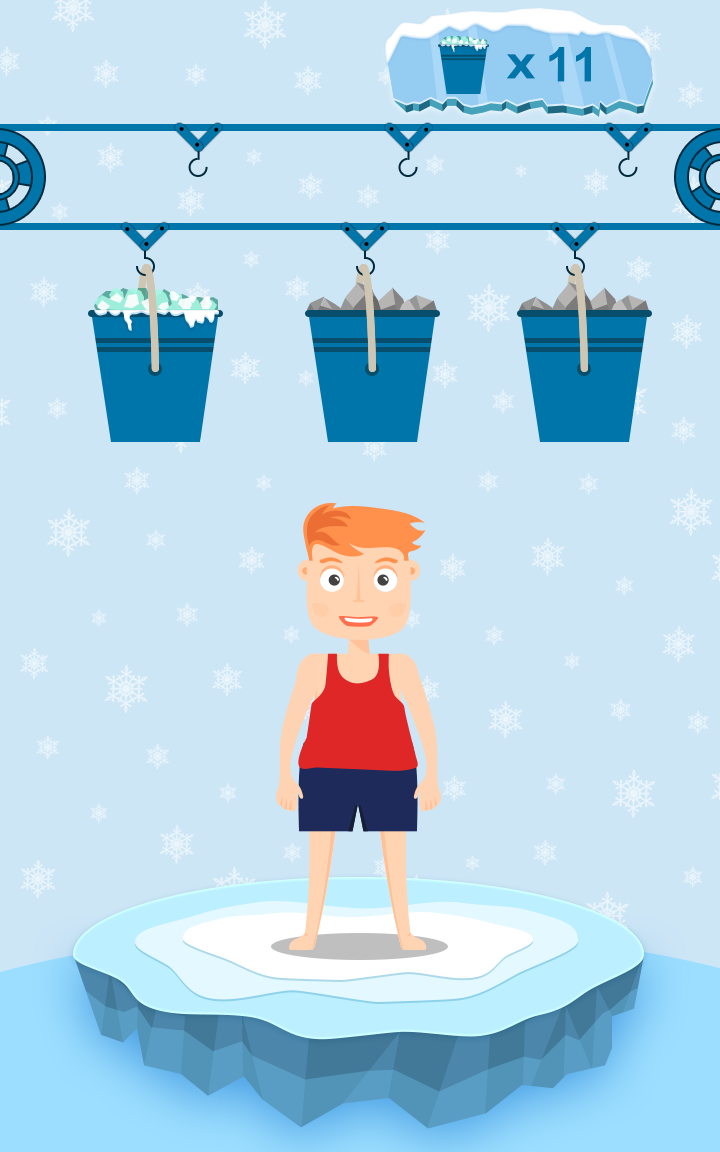
<style>
.page{position:relative;width:720px;height:1152px;background:#cde6f6}
.page>*{position:absolute;margin:0}
.t1{font:36px "HYk2gj";color:#0075a9}
.t2{font:48px "Arial-BoldMT";color:#0075a9}
</style>
<div class="page">
<p class="t1" style="left:506px;top:54px;width:29px;height:25px">X</p>
<p class="t2" style="left:549px;top:47px;width:42px;height:35px">11</p>
</div>
